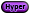
<style>
.page{position:relative;width:30px;height:14px;background:#ffffff}
.page>*{position:absolute;margin:0}
.t1{font:8px "Calibri-Bold";color:#000000}
</style>
<div class="page">
<p class="t1" style="left:5px;top:4px;width:21px;height:7px">Hyper</p>
</div>
